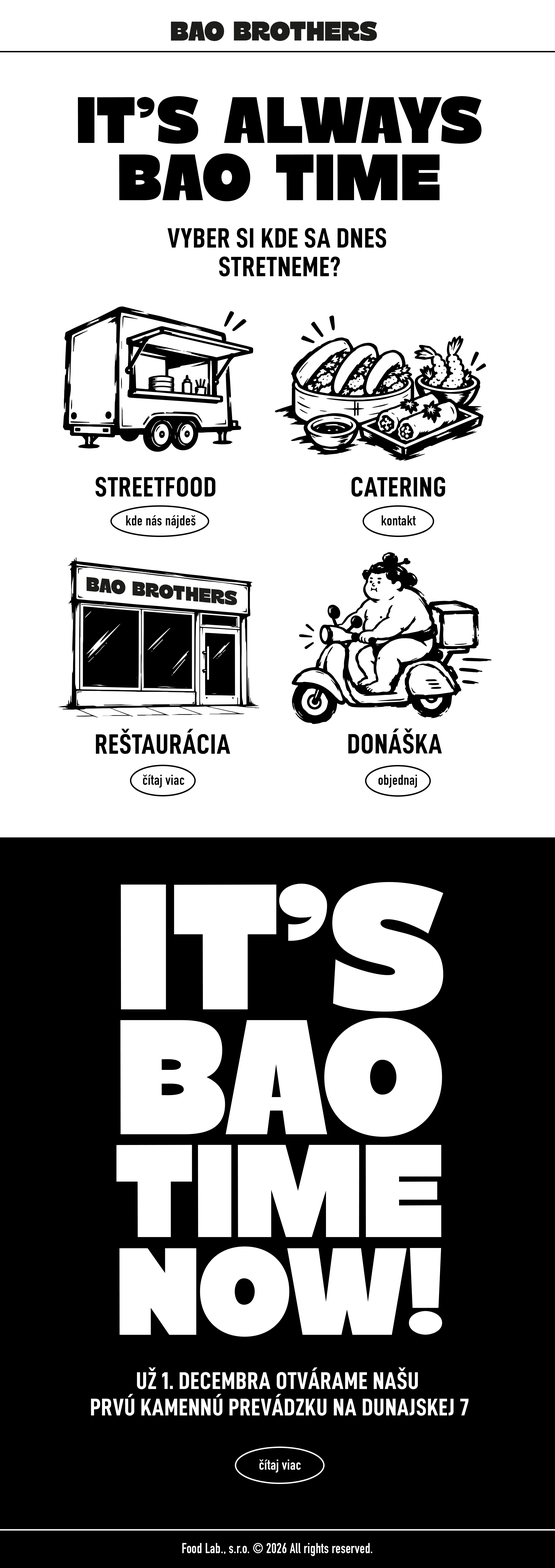
<style>
.page{position:relative;width:555px;height:1568px;background:#ffffff}
.page>*{position:absolute;margin:0}
.t1{font:66.2px/57.3px "Chunk-Regular";letter-spacing:0.02em;color:#000000;text-transform:uppercase}
.t2{font:28.1px/28.6px "D-DINCondensed-Bold";letter-spacing:0.02em;color:#000000;text-transform:uppercase}
.t3{font:28.1px "D-DINCondensed-Bold";letter-spacing:0.02em;color:#000000;text-transform:uppercase}
.t4{font:14.2px "DINCondensed-Bold";letter-spacing:0.02em;color:#000000}
.t5{font:24.2px/26.4px "D-DINCondensed-Bold";letter-spacing:0.02em;color:#ffffff;text-transform:uppercase}
.t6{font:14.2px "DINCondensed-Bold";letter-spacing:0.02em;color:#ffffff}
.t7{font:14.2px "DINCondensed-Bold";letter-spacing:0.02em;color:#ffffff;scale:0.93 1}
</style>
<div class="page">
<p class="t1" style="left:78px;top:96px;width:404px;height:105px;text-align:center">IT’s ALWAYS<br>BAO TIME</p>
<p class="t2" style="left:167px;top:228px;width:219px;height:48px;text-align:center">vyber si kde sa dnes <br>stretneme?</p>
<p class="t3" style="left:95px;top:477px;width:121px;height:20px">streetfood</p>
<p class="t3" style="left:351px;top:477px;width:94px;height:20px">catering</p>
<p class="t4" style="left:126px;top:515px;width:70px;height:13px">kde nás nájdeš</p>
<p class="t4" style="left:382px;top:515px;width:34px;height:11px">kontakt</p>
<p class="t3" style="left:96px;top:729px;width:134px;height:25px">reštaurácia</p>
<p class="t3" style="left:348px;top:728px;width:94px;height:26px">donáška</p>
<p class="t4" style="left:143px;top:775px;width:42px;height:13px">čítaj viac</p>
<p class="t4" style="left:378px;top:775px;width:39px;height:13px">objednaj</p>
<p class="t5" style="left:91px;top:1367px;width:378px;height:49px;text-align:center">už 1. decembra otvárame našu <br>prvú kamennú prevádzku na dunajskej 7</p>
<p class="t6" style="left:259px;top:1460px;width:42px;height:13px">čítaj viac</p>
<p class="t7" style="left:182px;top:1543px;width:190px;height:13px">Food Lab., s.r.o. © 2026 All rights reserved.</p>
</div>
